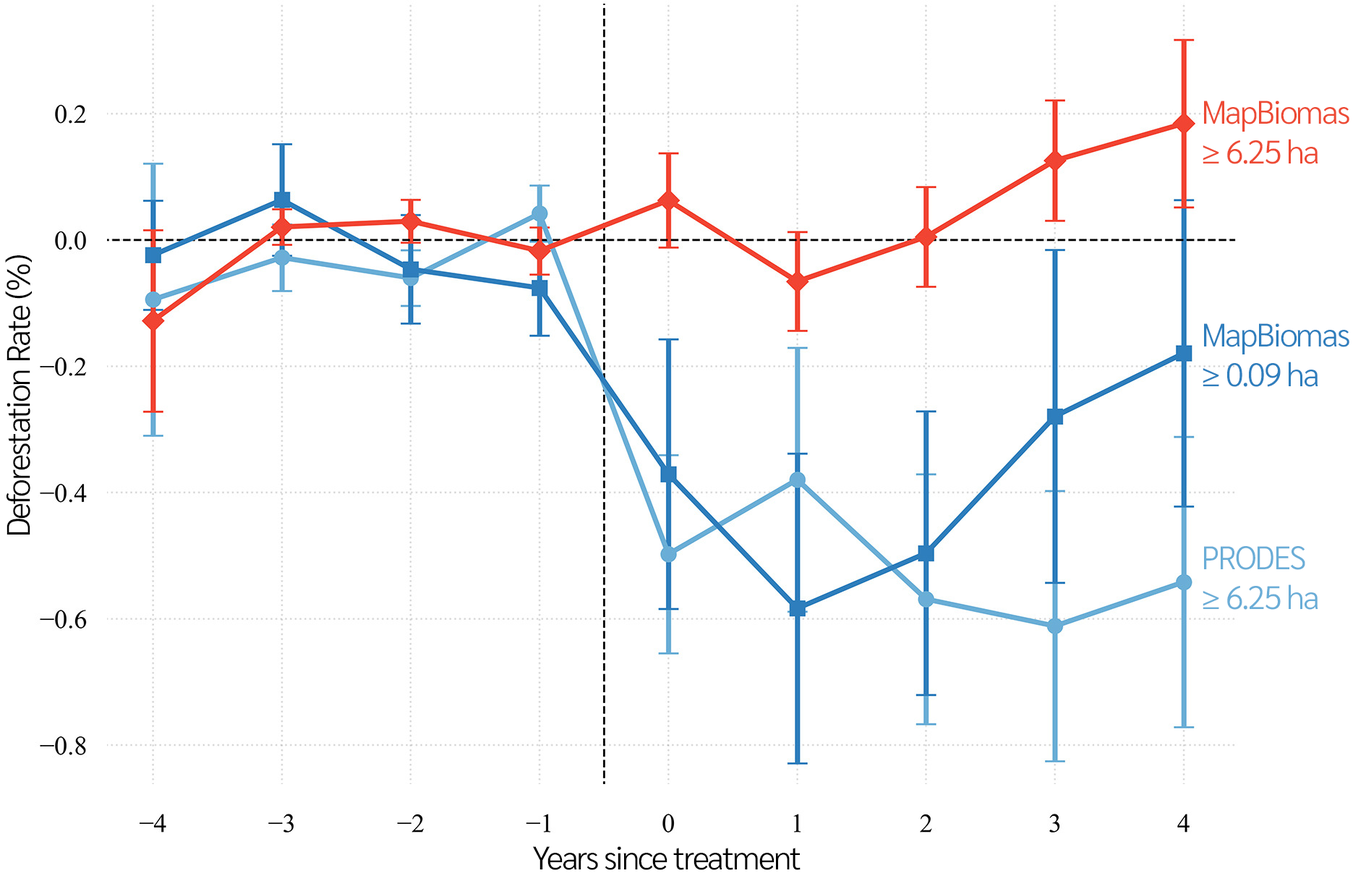
<style>
.page{position:relative;width:1353px;height:881px;background:#ffffff}
.page>*{position:absolute;margin:0}
.t1{font:32.7px "Sarabun-Light";letter-spacing:-0.05em;color:#ed4a34}
.t2{font:32.7px "Sarabun-Light";letter-spacing:-0.05em;color:#000000}
.t3{font:32.7px "Sarabun-Light";letter-spacing:-0.05em;color:#2e7ebd}
.t4{font:32.7px "Sarabun-Light";letter-spacing:-0.05em;color:#6aadd7}
</style>
<div class="page">
<p class="t1" style="left:1203px;top:101px;width:147px;height:63px">MapBiomas<br>≥ 6.25 ha</p>
<p class="t2" style="left:5px;top:255px;width:27px;height:280px;rotate:-90deg">Deforestation Rate (%)</p>
<p class="t3" style="left:1203px;top:323px;width:147px;height:64px">MapBiomas<br>≥ 0.09 ha</p>
<p class="t4" style="left:1203px;top:546px;width:116px;height:64px">PRODES<br>≥ 6.25 ha</p>
<p class="t2" style="left:533px;top:846px;width:268px;height:24px">Years since treatment</p>
</div>
